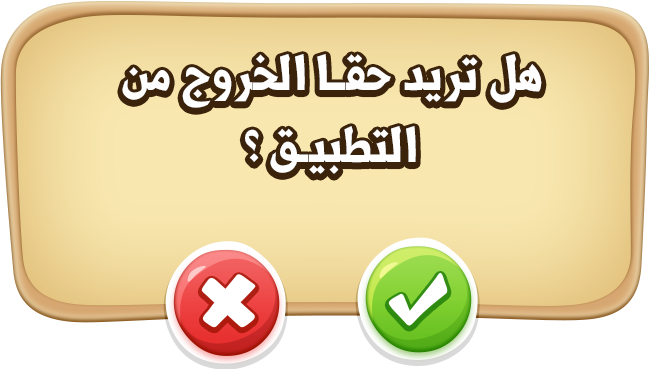
<style>
.page{position:relative;width:650px;height:369px}
.page>*{position:absolute;margin:0}
.t1{font:60px "Shorooq_N1";letter-spacing:0.03em;color:#fefefe}
</style>
<div class="page">
<p class="t1" style="left:122px;top:54px;width:420px;height:120px;text-align:center">هل تريد حقا الخروج من<br>التطبيق ؟</p>
</div>
